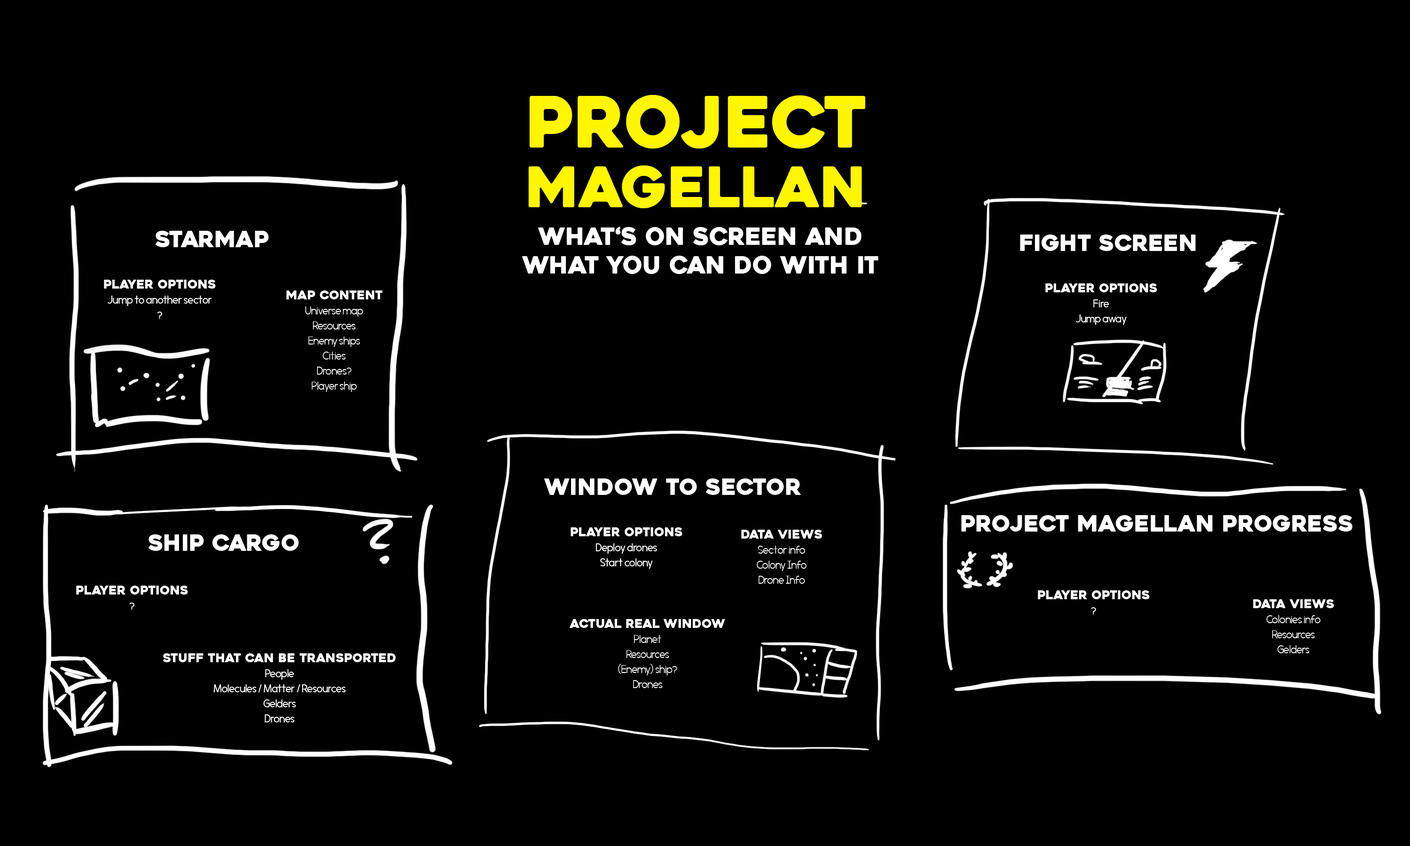
<style>
.page{position:relative;width:1410px;height:846px;background:#000000}
.page>*{position:absolute;margin:0}
.t1{font:55.9px/59.7px "Heavitas";color:#fff600;text-transform:uppercase}
.t2{font:70.5px/65.3px "Heavitas";color:#fff600;text-transform:uppercase}
.t3{font:22.6px "Heavitas";color:#ffffff;text-transform:uppercase}
.t4{font:23.8px "Heavitas";color:#ffffff;text-transform:uppercase}
.t5{font:12.2px/15px "Morningtype";color:#ffffff}
.t6{font:12.2px/15px "Heavitas";color:#ffffff;text-transform:uppercase}
.t7{font:12.2px/15px "Morningtype-Light";color:#ffffff}
</style>
<div class="page">
<p class="t1" style="left:528px;top:95px;width:337px;height:113px;text-align:center"><span class="t2">Project<br></span>Magellan</p>
<p class="t3" style="left:156px;top:231px;width:113px;height:16px">Starmap</p>
<p class="t4" style="left:522px;top:226px;width:356px;height:48px;text-align:center">what‘s on screen and<br>what you can do with it</p>
<p class="t3" style="left:1020px;top:234px;width:175px;height:17px">Fight Screen</p>
<p class="t5" style="left:104px;top:280px;width:112px;height:39px;text-align:center"><span class="t6">Player Options</span><br>Jump to another sector<br>?</p>
<p class="t7" style="left:286px;top:290px;width:97px;height:102px;text-align:center"><span class="t6">Map content<br></span>Universe map<br>Resources<br>Enemy ships<br>Cities<br>Drones?<br>Player ship</p>
<p class="t6" style="left:1045px;top:283px;width:112px;height:42px;text-align:center">Player Options<br><span class="t5">Fire<br>Jump away</span></p>
<p class="t3" style="left:544px;top:478px;width:257px;height:17px">Window to sector</p>
<p class="t3" style="left:961px;top:515px;width:391px;height:16px">Project Magellan Progress</p>
<p class="t5" style="left:570px;top:527px;width:112px;height:42px;text-align:center"><span class="t6">Player Options<br></span>Deploy drones<br>Start colony</p>
<p class="t7" style="left:741px;top:530px;width:81px;height:54px;text-align:center"><span class="t6">Data views</span><br>Sector info<br>Colony Info<br>Drone Info</p>
<p class="t3" style="left:148px;top:534px;width:151px;height:17px">Ship Cargo</p>
<p class="t6" style="left:76px;top:586px;width:112px;height:23px;text-align:center">Player Options<br><span class="t5">?</span></p>
<p class="t6" style="left:1038px;top:590px;width:111px;height:24px;text-align:center">Player Options<br><span class="t5">?</span></p>
<p class="t7" style="left:1253px;top:599px;width:81px;height:54px;text-align:center"><span class="t6">Data views</span><br>Colonies info<br>Resources<br>Gelders</p>
<p class="t7" style="left:569px;top:619px;width:156px;height:69px;text-align:center"><span class="t6">actual real window<br></span>Planet<br>Resources<br>(Enemy) ship?<br>Drones</p>
<p class="t5" style="left:163px;top:653px;width:233px;height:69px;text-align:center"><span class="t6">Stuff that can be transported<br></span>People<br>Molecules / Matter / Resources<br>Gelders<br>Drones</p>
</div>
